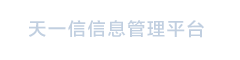
<style>
.page{position:relative;width:240px;height:60px;background:#ffffff}
.page>*{position:absolute;margin:0}
.t1{font:18px "FZLTZHK--GBK1-0";letter-spacing:0.1em;color:#c1cfe0}
</style>
<div class="page">
<p class="t1" style="left:29px;top:20px;width:175px;height:18px">天一信信息管理平台</p>
</div>
